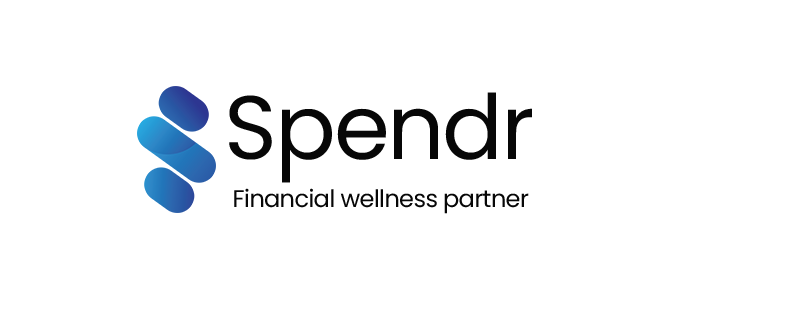
<style>
.page{position:relative;width:800px;height:318px;background:#ffffff}
.page>*{position:absolute;margin:0}
.t1{font:90px "Poppins-Regular";letter-spacing:-0.025em;color:#070707}
.t2{font:24px "Poppins-Regular";letter-spacing:-0.025em;color:#070707}
</style>
<div class="page">
<p class="t1" style="left:229px;top:92px;width:303px;height:91px">Spendr</p>
<p class="t2" style="left:234px;top:188px;width:295px;height:26px">Financial wellness partner</p>
</div>
